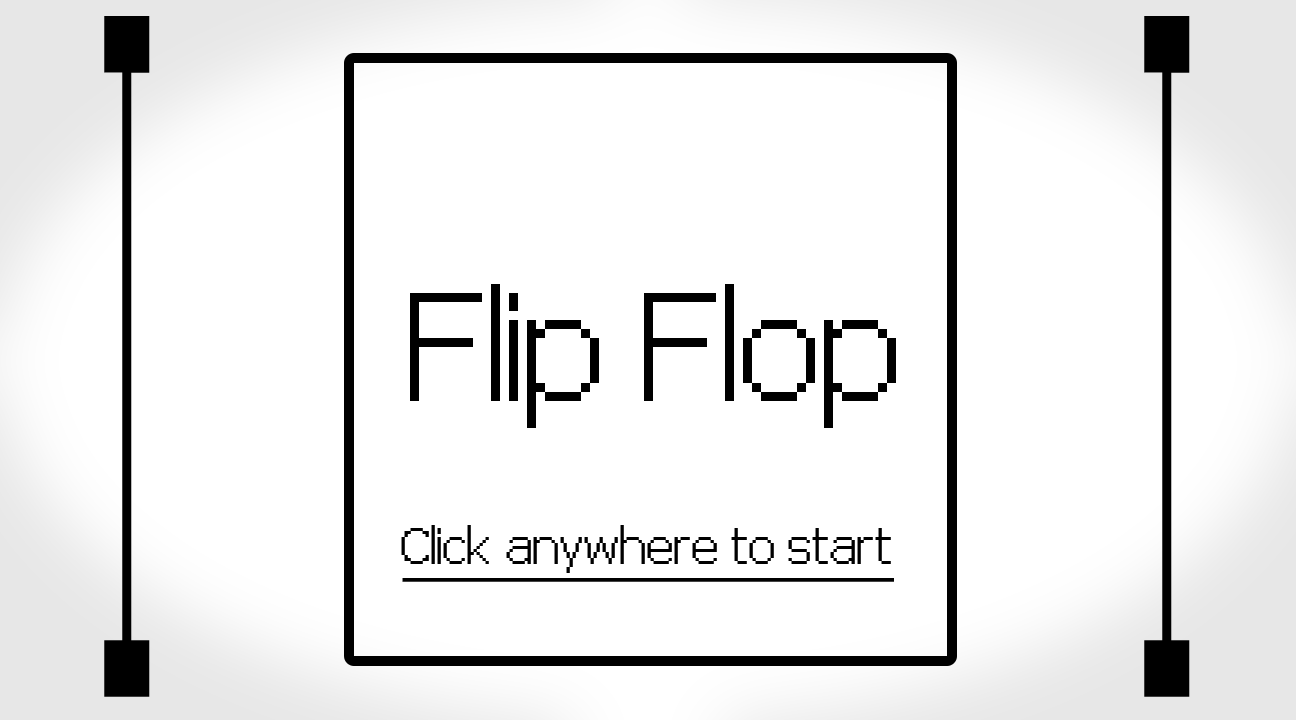
<style>
.page{position:relative;width:1296px;height:720px;background:#ffffff}
.page>*{position:absolute;margin:0}
.t1{font:454.1px "pix-PixelFJVerdana12pt-Regular";color:#000000;scale:0.16 1}
.t2{font:72px "pix-PixelFJVerdana12pt-Regular";color:#000000}
.t3{font:24px "pix-PixelFJVerdana12pt-Regular";color:#000000}
.t4{font:245.8px "pix-PixelFJVerdana12pt-Regular";color:#000000;scale:0.12 1}
</style>
<div class="page">
<p class="t1" style="left:104px;top:16px;width:46px;height:681px;rotate:180deg">I</p>
<p class="t1" style="left:1144px;top:16px;width:46px;height:681px;rotate:180deg">I</p>
<p class="t2" style="left:410px;top:284px;width:486px;height:144px">Flip Flop</p>
<p class="t3" style="left:401px;top:525px;width:490px;height:48px">Click anywhere to start</p>
<p class="t4" style="left:402px;top:578px;width:492px;height:4px;rotate:90deg">|</p>
</div>
